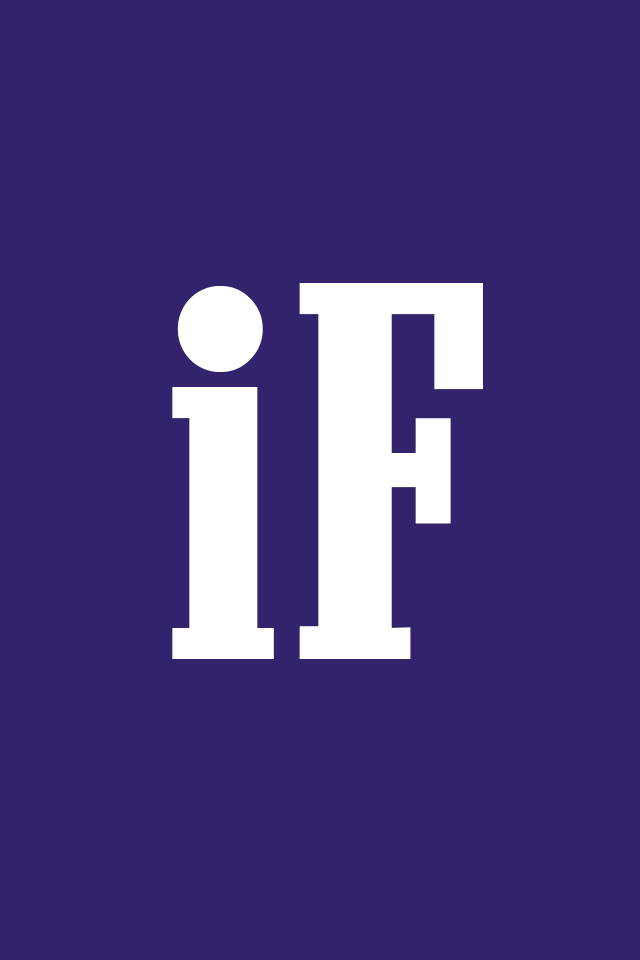
<style>
.page{position:relative;width:640px;height:960px;background:#33236d}
.page>*{position:absolute;margin:0}
.t1{font:550px "Marlboro";color:#ffffff}
</style>
<div class="page">
<p class="t1" style="left:172px;top:283px;width:311px;height:376px">iF</p>
</div>
